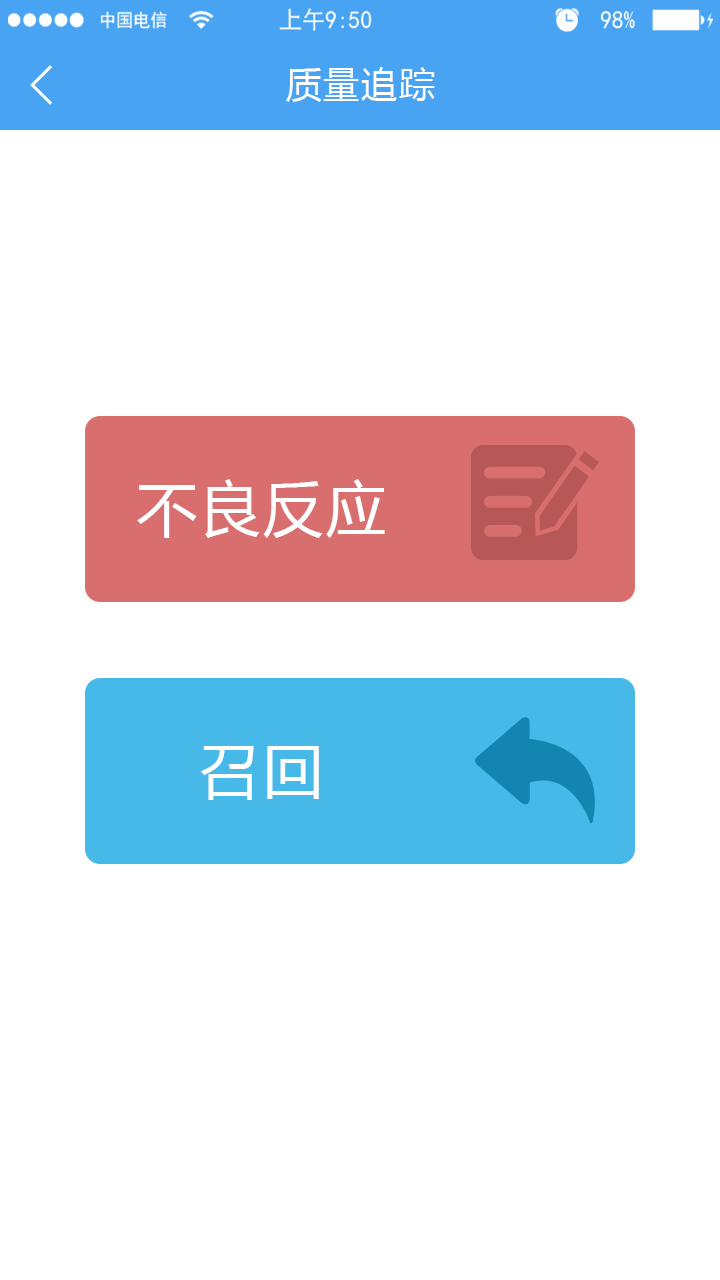
<style>
.page{position:relative;width:720px;height:1280px;background:#ffffff}
.page>*{position:absolute;margin:0}
.t1{font:36px "MicrosoftYaHei";letter-spacing:0.05em;color:#ffffff}
.t2{font:60px "MicrosoftYaHei";letter-spacing:0.05em;color:#ffffff}
</style>
<div class="page">
<p class="t1" style="left:286px;top:67px;width:149px;height:35px">质量追踪</p>
<p class="t2" style="left:137px;top:479px;width:248px;height:59px">不良反应</p>
<p class="t2" style="left:200px;top:746px;width:119px;height:54px">召回</p>
</div>
